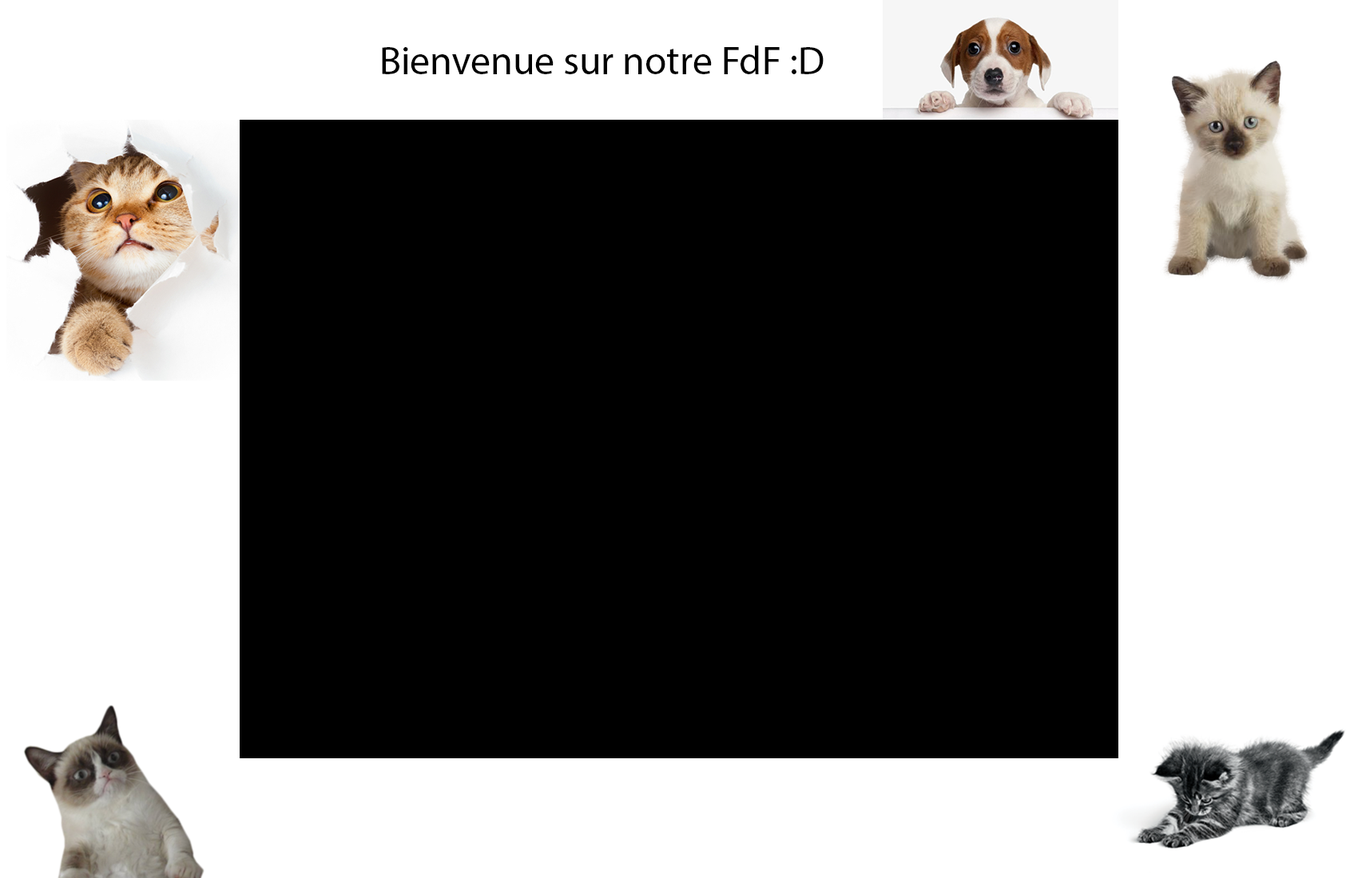
<style>
.page{position:relative;width:1358px;height:878px;background:#000000}
.page>*{position:absolute;margin:0}
.t1{font:9.6px "MyriadPro-Regular";color:#000000}
</style>
<div class="page">
<p class="t1" style="left:382px;top:46px;width:441px;height:28px">Bienvenue sur notre FdF :D</p>
</div>
